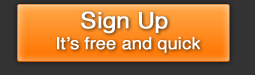
<style>
.page{position:relative;width:255px;height:75px;background:#333333}
.page>*{position:absolute;margin:0}
.t1{font:22.3px "Helvetica";letter-spacing:-0.015em;color:#ffffff;font-weight:bold;scale:1.08 1}
.t2{font:16.7px "Helvetica";letter-spacing:-0.015em;color:#ffffff;font-weight:bold;scale:1.08 1}
</style>
<div class="page">
<p class="t1" style="left:81px;top:11px;width:87px;height:23px">Sign Up</p>
<p class="t2" style="left:57px;top:37px;width:144px;height:16px">It’s free and quick</p>
</div>
